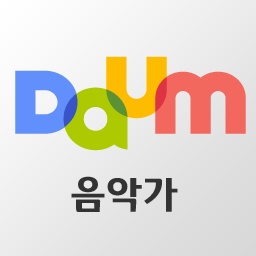
<style>
.page{position:relative;width:256px;height:256px}
.page>*{position:absolute;margin:0}
.t1{font:36px "Daum_SemiBold";color:#333333}
</style>
<div class="page">
<p class="t1" style="left:71px;top:176px;width:107px;height:36px">음악가</p>
</div>
